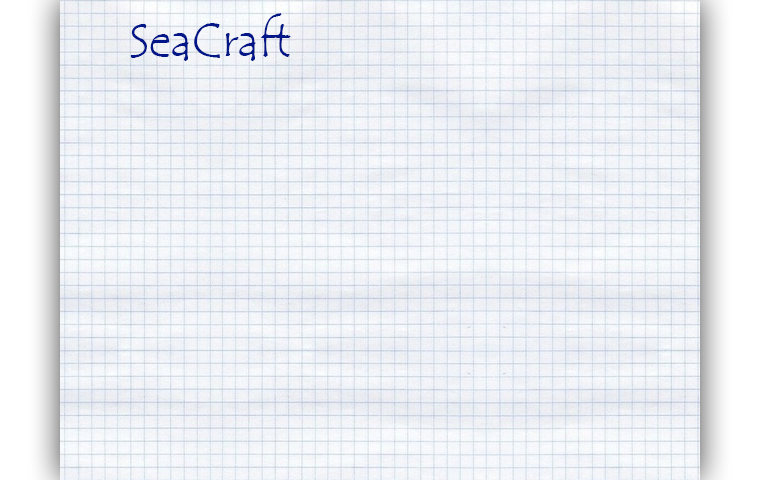
<style>
.page{position:relative;width:760px;height:480px}
.page>*{position:absolute;margin:0}
.t1{font:48px "TempusSansITC";color:#031688}
</style>
<div class="page">
<p class="t1" style="left:130px;top:13px;width:161px;height:48px">SeaCraft</p>
</div>
